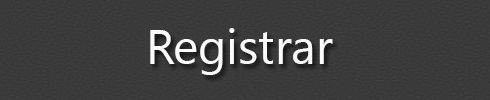
<style>
.page{position:relative;width:490px;height:100px;background:#3b3b3b}
.page>*{position:absolute;margin:0}
.t1{font:48px "SegoeUI";color:#fbfbfb}
</style>
<div class="page">
<p class="t1" style="left:150px;top:28px;width:183px;height:47px">Registrar</p>
</div>
